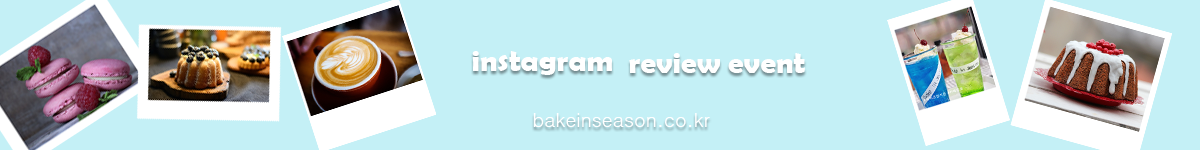
<style>
.page{position:relative;width:1200px;height:150px;background:#c4f0f6}
.page>*{position:absolute;margin:0}
.t1{font:31.1px "BerlinSansFBDemi-Bold";color:#ffffff}
.t2{font:19.4px "Dotum";color:#ffffff}
</style>
<div class="page">
<p class="t1" style="left:472px;top:51px;width:140px;height:24px">instagram</p>
<p class="t1" style="left:629px;top:53px;width:176px;height:20px">review event</p>
<p class="t2" style="left:533px;top:113px;width:177px;height:14px">bakeinseason.co.kr</p>
</div>
